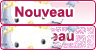
<style>
.page{position:relative;width:96px;height:50px}
.page>*{position:absolute;margin:0}
.t1{font:14px "Arial-BoldMT";color:#ad194f}
.t2{font:14px "Arial-BoldMT"}
</style>
<div class="page">
<p class="t1" style="left:15px;top:6px;width:58px;height:11px">Nouveau</p>
<p class="t2" style="left:16px;top:30px;width:58px;height:11px">Nouveau</p>
</div>
